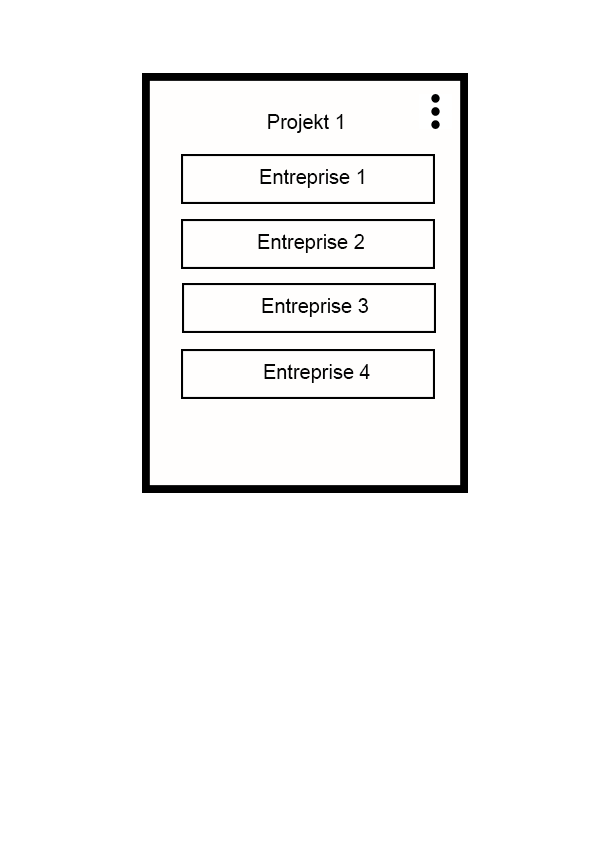
<style>
.page{position:relative;width:595px;height:842px;background:#ffffff}
.page>*{position:absolute;margin:0}
.t1{font:20px "ArialMT";color:#040404}
</style>
<div class="page">
<p class="t1" style="left:268px;top:114px;width:75px;height:19px">Projekt 1</p>
<p class="t1" style="left:260px;top:169px;width:104px;height:19px">Entreprise 1</p>
<p class="t1" style="left:258px;top:234px;width:106px;height:19px">Entreprise 2</p>
<p class="t1" style="left:262px;top:298px;width:107px;height:19px">Entreprise 3</p>
<p class="t1" style="left:264px;top:364px;width:106px;height:19px">Entreprise 4</p>
</div>
